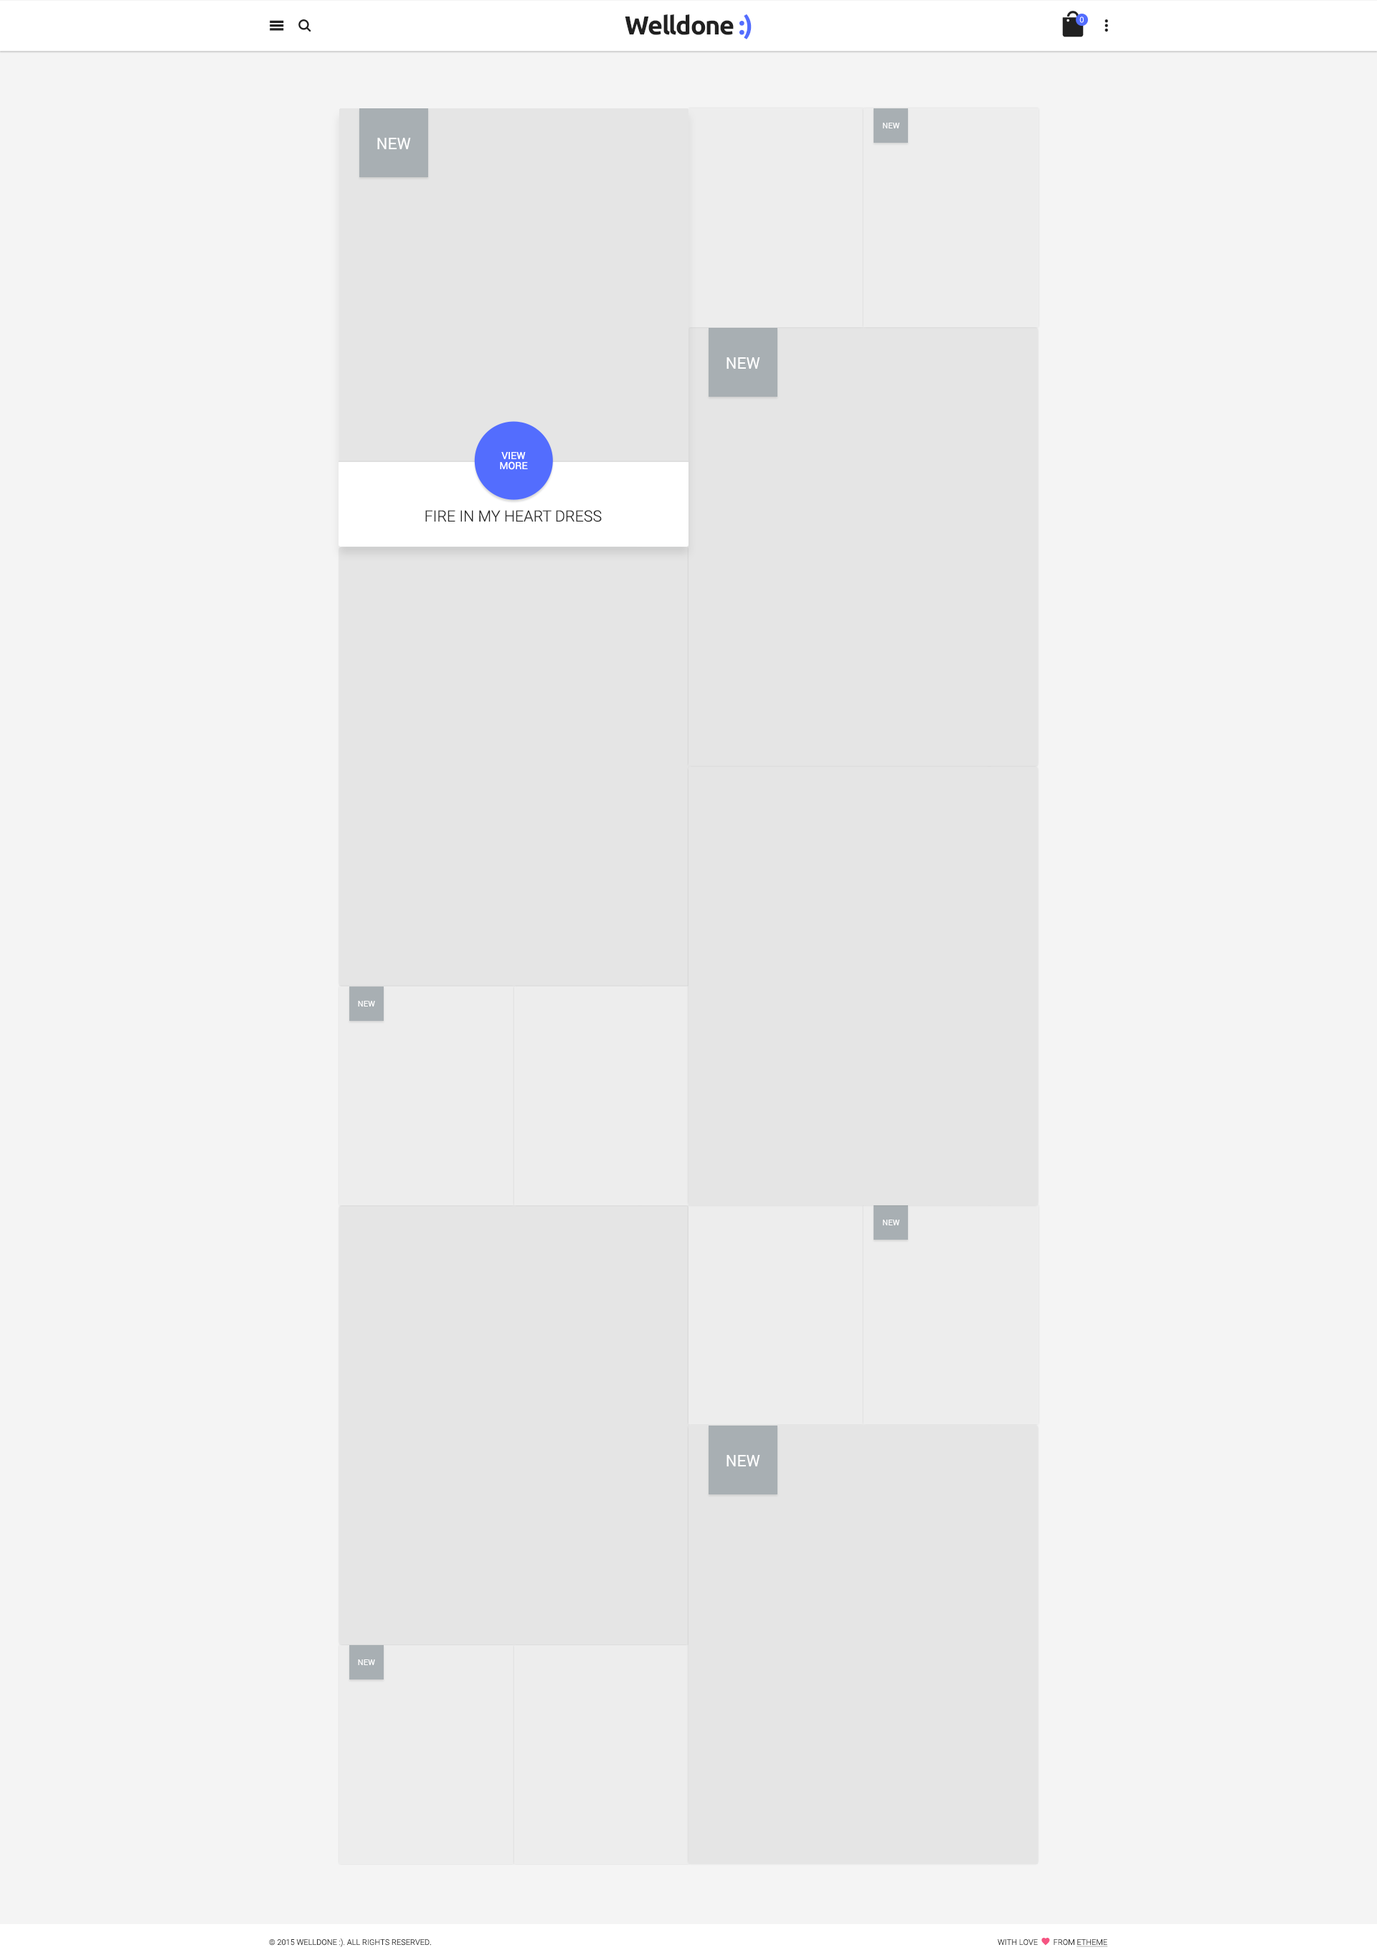
<style>
.page{position:relative;width:1377px;height:1960px;background:#f4f4f4}
.page>*{position:absolute;margin:0}
.t1{font:25.8px "Ubuntu-Bold";letter-spacing:-0.04em;color:#212121}
.t2{font:25.8px "Ubuntu-Bold";letter-spacing:-0.04em;color:#536dfe}
.t3{font:7.9px "Roboto-Light";color:#ffffff}
.t4{font:8px "Roboto-Regular";color:#ffffff;text-transform:uppercase}
.t5{font:15.9px "Roboto-Regular";color:#ffffff;text-transform:uppercase}
.t6{font:10px/10px "Roboto-Regular";color:#ffffff;text-transform:uppercase}
.t7{font:15.4px "Roboto-Light";color:#2b2b2b;text-transform:uppercase}
.t8{font:7.9px "Roboto-Light";color:#2b2b2b;text-transform:uppercase}
</style>
<div class="page">
<p class="t1" style="left:625px;top:14px;width:127px;height:25px">Welldone <span class="t2">:)</span></p>
<p class="t3" style="left:1080px;top:16px;width:4px;height:7px">0</p>
<p class="t4" style="left:883px;top:123px;width:17px;height:5px">new</p>
<p class="t5" style="left:377px;top:138px;width:34px;height:11px">new</p>
<p class="t5" style="left:727px;top:357px;width:33px;height:12px">new</p>
<p class="t6" style="left:500px;top:452px;width:28px;height:18px;text-align:center">VIEW<br>MORE</p>
<p class="t7" style="left:425px;top:510px;width:177px;height:12px">Fire In My Heart Dress</p>
<p class="t4" style="left:358px;top:1001px;width:17px;height:5px">new</p>
<p class="t4" style="left:883px;top:1220px;width:17px;height:5px">new</p>
<p class="t5" style="left:727px;top:1455px;width:33px;height:11px">new</p>
<p class="t4" style="left:358px;top:1659px;width:17px;height:6px">new</p>
<p class="t8" style="left:269px;top:1938px;width:162px;height:9px">© 2015 Welldone :). All Rights Reserved.</p>
</div>
